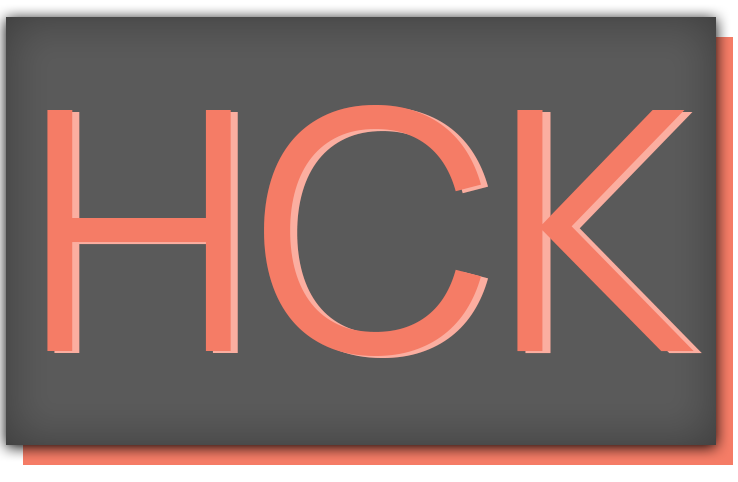
<style>
.page{position:relative;width:738px;height:482px;background:#5a5a5a}
.page>*{position:absolute;margin:0}
.t1{font:335.2px "VelaSans-Regular";color:#f57c66}
</style>
<div class="page">
<p class="t1" style="left:47px;top:105px;width:647px;height:251px">НСК</p>
<p class="t1" style="left:54px;top:107px;width:648px;height:251px">НСК</p>
</div>
